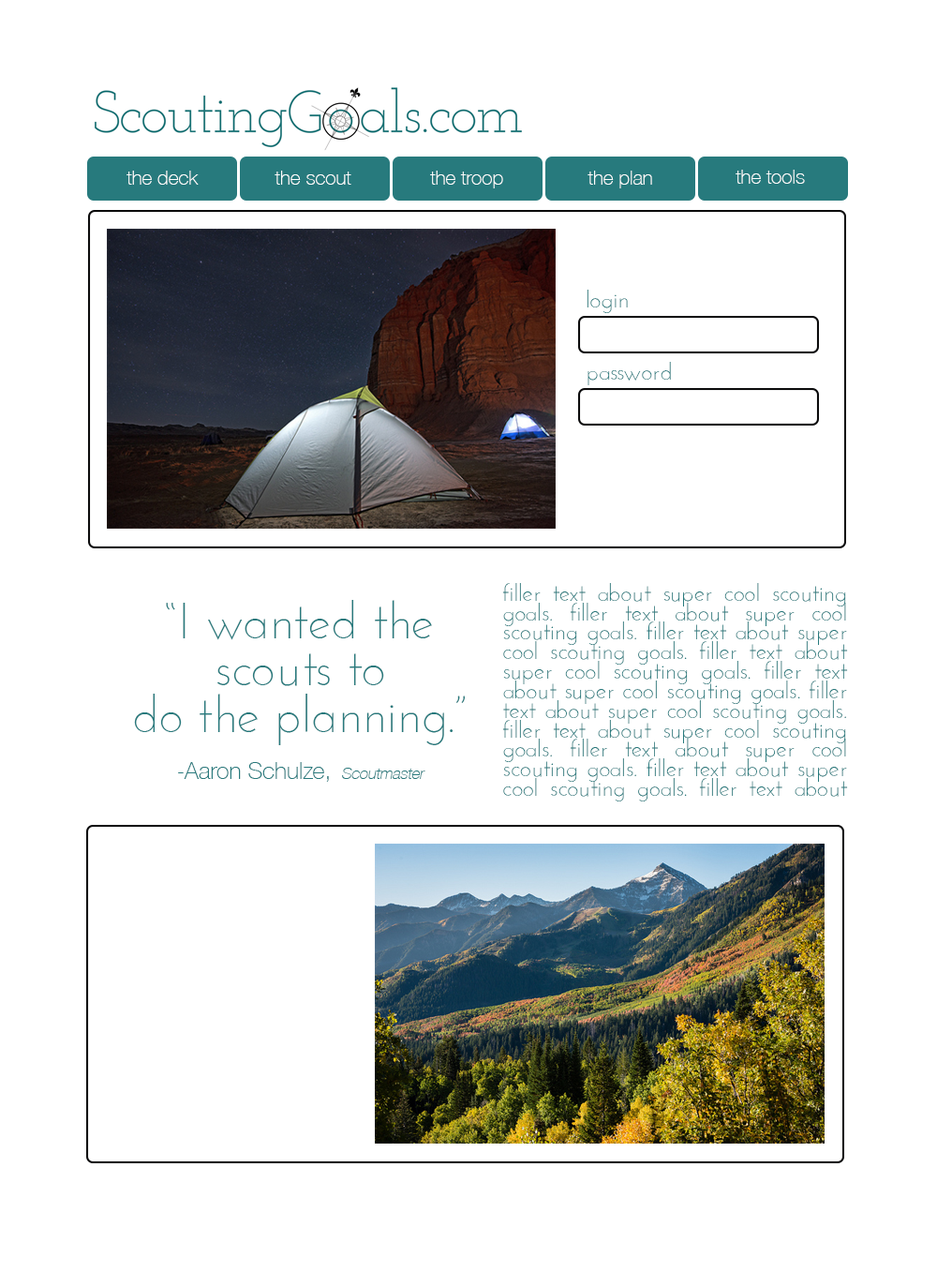
<style>
.page{position:relative;width:937px;height:1272px;background:#ffffff}
.page>*{position:absolute;margin:0}
.t1{font:19.5px "HelveticaNeue-Thin";color:#ffffff}
.t2{font:23.4px "JosefinSans-Light";color:#277a7d}
.t3{font:23.4px/19.5px "JosefinSans-Light";color:#277a7d}
.t4{font:50.8px/46.9px "JosefinSans-Light";color:#277a7d}
.t5{font:23.4px/46.9px "HelveticaNeue-Thin";color:#277a7d}
.t6{font:15.6px/46.9px "HelveticaNeue-Thin";color:#277a7d;font-style:italic}
</style>
<div class="page">
<p class="t1" style="left:127px;top:171px;width:72px;height:14px">the deck</p>
<p class="t1" style="left:275px;top:171px;width:77px;height:14px">the scout</p>
<p class="t1" style="left:430px;top:171px;width:73px;height:17px">the troop</p>
<p class="t1" style="left:588px;top:171px;width:64px;height:17px">the plan</p>
<p class="t1" style="left:736px;top:170px;width:69px;height:14px">the tools</p>
<p class="t2" style="left:587px;top:290px;width:41px;height:23px">login</p>
<p class="t2" style="left:588px;top:362px;width:83px;height:23px">password</p>
<p class="t3" style="left:502px;top:583px;width:346px;height:218px;text-align:justify">filler text about super cool scouting goals. filler text about super cool scouting goals. filler text about super cool scouting goals. filler text about super cool scouting goals. filler text about super cool scouting goals. filler text about super cool scouting goals. filler text about super cool scouting goals. filler text about super cool scouting goals. filler text about super cool scouting goals. filler text about super cool scouting goals. filler text about super cool scouting goals.</p>
<p class="t4" style="left:134px;top:600px;width:332px;height:182px;text-align:center">“I wanted the <br>scouts to <br>do the planning.” <br><span class="t5">-Aaron Schulze, </span><span class="t6">Scoutmaster</span></p>
</div>
